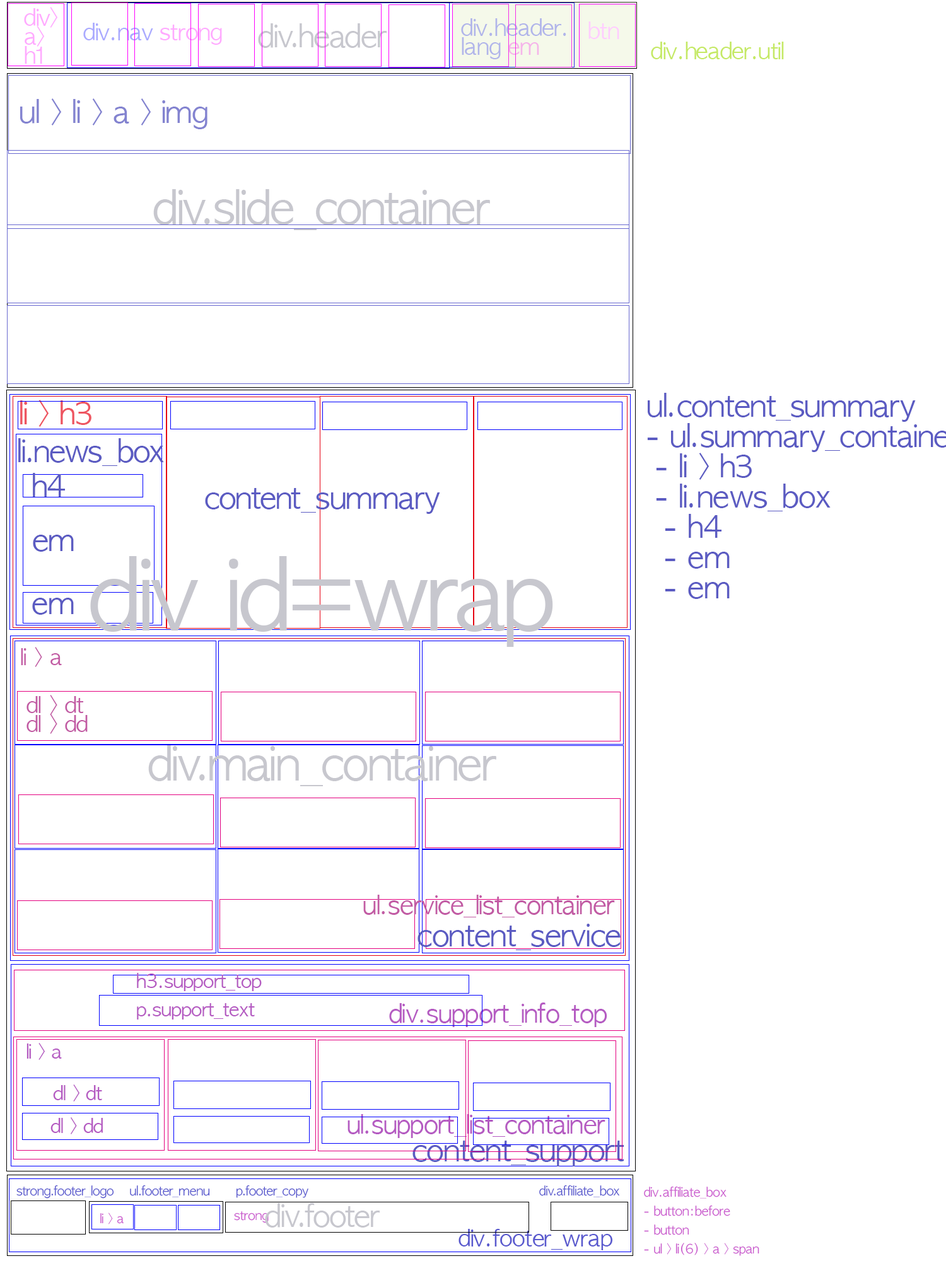
<style>
.page{position:relative;width:946px;height:1261px;background:#ffffff}
.page>*{position:absolute;margin:0}
.t1{font:22.7px/18.9px "AppleGothic";letter-spacing:-0.025em;color:#ffaaff}
.t2{font:22.7px "AppleGothic";letter-spacing:-0.025em;color:#aaaaff}
.t3{font:22.7px "AppleGothic";letter-spacing:-0.025em;color:#ffaaff}
.t4{font:30.3px "AppleGothic";letter-spacing:-0.025em;color:#c7c7ce}
.t5{font:22.7px/18.9px "AppleGothic";letter-spacing:-0.025em;color:#aaaaff}
.t6{font:22.7px "AppleGothic";letter-spacing:-0.025em;color:#ffcdff}
.t7{font:22.7px "AppleGothic";letter-spacing:-0.025em;color:#c5e964}
.t8{font:30.3px "AppleGothic";letter-spacing:-0.025em;color:#8383d0}
.t9{font:45.4px "AppleGothic";letter-spacing:-0.025em;color:#c7c7ce}
.t10{font:30.3px "AppleGothic";letter-spacing:-0.025em;color:#ee5561}
.t11{font:30.3px "AppleGothic";letter-spacing:-0.025em;color:#5b5bc2}
.t12{font:94.6px "AppleGothic";letter-spacing:-0.025em;color:#c7c7ce}
.t13{font:22.1px "AppleGothic";letter-spacing:-0.025em;color:#c25ba4}
.t14{font:22.1px/18.9px "AppleGothic";letter-spacing:-0.025em;color:#c25ba4}
.t15{font:25.2px "AppleGothic";letter-spacing:-0.025em;color:#c25ba4}
.t16{font:18.9px "AppleGothic";letter-spacing:-0.025em;color:#b55bc2}
.t17{font:25.2px "AppleGothic";letter-spacing:-0.025em;color:#b55bc2}
.t18{font:12.6px "AppleGothic";letter-spacing:-0.025em;color:#5959ce}
.t19{font:12.6px/18.9px "AppleGothic";letter-spacing:-0.025em;color:#ca59ce}
.t20{font:12.6px "AppleGothic";letter-spacing:-0.025em;color:#ca59ce}
.t21{font:22.7px "AppleGothic";letter-spacing:-0.025em;color:#5959ce}
</style>
<div class="page">
<p class="t1" style="left:24px;top:7px;width:33px;height:57px">div&gt;<br>a&gt;<br>h1</p>
<p class="t2" style="left:83px;top:23px;width:139px;height:22px">div.nav<span class="t3"> strong</span></p>
<p class="t4" style="left:258px;top:23px;width:128px;height:25px">div.header</p>
<p class="t5" style="left:461px;top:18px;width:105px;height:41px">div.header.<br>lang<span class="t1"> em</span></p>
<p class="t6" style="left:588px;top:21px;width:31px;height:18px">btn</p>
<p class="t7" style="left:651px;top:42px;width:133px;height:17px">div.header.util</p>
<p class="t8" style="left:20px;top:98px;width:187px;height:31px">ul &gt; li &gt; a &gt; img</p>
<p class="t9" style="left:153px;top:189px;width:337px;height:41px">div.slide_container</p>
<p class="t10" style="left:20px;top:400px;width:71px;height:27px">li &gt; h3</p>
<p class="t11" style="left:18px;top:438px;width:146px;height:28px">li.news_box</p>
<p class="t11" style="left:33px;top:473px;width:32px;height:24px">h4</p>
<p class="t11" style="left:205px;top:488px;width:235px;height:26px">content_summary</p>
<p class="t11" style="left:33px;top:535px;width:41px;height:17px">em</p>
<p class="t12" style="left:90px;top:556px;width:463px;height:91px">div id=wrap</p>
<p class="t11" style="left:32px;top:598px;width:42px;height:17px">em</p>
<p class="t13" style="left:21px;top:647px;width:41px;height:20px">li &gt; a</p>
<p class="t14" style="left:26px;top:695px;width:62px;height:39px">dl &gt; dt<br>dl &gt; dd</p>
<p class="t9" style="left:148px;top:745px;width:348px;height:41px">div.main_container</p>
<p class="t15" style="left:363px;top:895px;width:252px;height:22px">ul.service_list_container</p>
<p class="t11" style="left:417px;top:924px;width:203px;height:26px">content_service</p>
<p class="t16" style="left:137px;top:973px;width:125px;height:18px">h3.support_top</p>
<p class="t16" style="left:137px;top:1003px;width:118px;height:16px">p.support_text</p>
<p class="t17" style="left:389px;top:1002px;width:218px;height:25px">div.support_info_top</p>
<p class="t16" style="left:26px;top:1043px;width:36px;height:17px">li &gt; a</p>
<p class="t16" style="left:53px;top:1084px;width:49px;height:17px">dl &gt; dt</p>
<p class="t16" style="left:50px;top:1117px;width:53px;height:17px">dl &gt; dd</p>
<p class="t17" style="left:347px;top:1114px;width:258px;height:24px">ul.support_list_container</p>
<p class="t11" style="left:412px;top:1140px;width:212px;height:26px">content_support</p>
<p class="t18" style="left:16px;top:1185px;width:604px;height:14px">strong.footer_logo ul.footer_menu       p.footer_copy                                                              div.affiliate_box</p>
<p class="t19" style="left:644px;top:1186px;width:115px;height:70px">div.affiliate_box<br>- button:before<br>- button<br>- ul &gt; li(6) &gt; a &gt; span</p>
<p class="t4" style="left:265px;top:1203px;width:115px;height:25px">div.footer</p>
<p class="t20" style="left:100px;top:1212px;width:24px;height:12px">li &gt; a</p>
<p class="t20" style="left:234px;top:1211px;width:35px;height:12px">strong</p>
<p class="t21" style="left:458px;top:1229px;width:154px;height:21px">div.footer_wrap</p>
</div>
